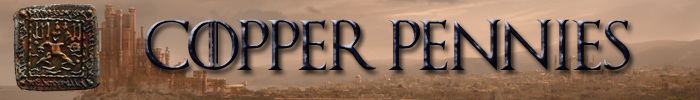
<style>
.page{position:relative;width:700px;height:100px}
.page>*{position:absolute;margin:0}
.t1{font:50px "GameofThrones"}
</style>
<div class="page">
<p class="t1" style="left:144px;top:19px;width:486px;height:51px">COPPER PENNIES</p>
</div>
